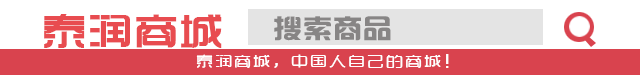
<style>
.page{position:relative;width:640px;height:75px;background:#ffffff}
.page>*{position:absolute;margin:0}
.t1{font:38.6px "TRENDS";letter-spacing:0.03em;color:#e84c50;font-weight:bold;scale:1.12 1}
.t2{font:26.1px "hzgb";letter-spacing:0.03em;color:#878585;scale:1.12 1}
.t3{font:15.3px "TRENDS";letter-spacing:0.15em;color:#ffffff;scale:1.08 1}
</style>
<div class="page">
<p class="t1" style="left:44px;top:14px;width:178px;height:34px">泰润商城</p>
<p class="t2" style="left:274px;top:16px;width:117px;height:25px">搜索商品</p>
<p class="t3" style="left:196px;top:54px;width:253px;height:14px">泰润商城，中国人自己的商城!</p>
</div>
